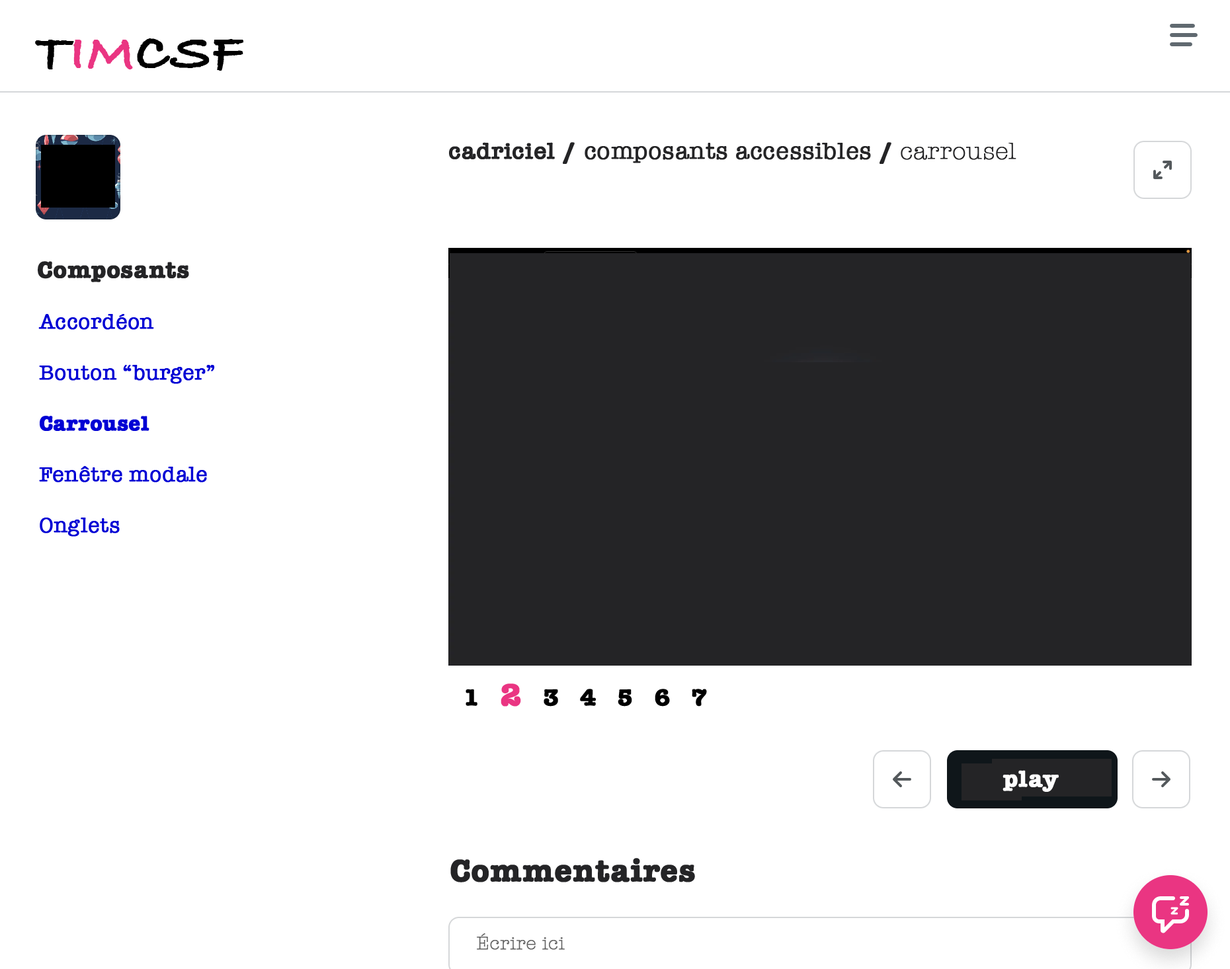
<style>
.page{position:relative;width:1230px;height:969px;background:#ffffff}
.page>*{position:absolute;margin:0}
.t1{font:52.9px "BradleyHandITCTT-Bold";letter-spacing:0.012em;color:#000000;font-weight:bold}
.t2{font:52.9px "BradleyHandITCTT-Bold";letter-spacing:0.012em;color:#ea3582;font-weight:bold}
.t3{font:23.8px "AmericanTypewriter";letter-spacing:0.012em;color:#242426;font-weight:bold}
.t4{font:23.8px "AmericanTypewriter-Semibold";letter-spacing:0.012em;color:#242426;font-weight:bold}
.t5{font:23.8px "AmericanTypewriter-Bold";letter-spacing:0.012em;color:#242426;font-weight:bold}
.t6{font:23.8px "AmericanTypewriter-Light";letter-spacing:0.012em;color:#242426;font-weight:bold}
.t7{font:21.2px "AmericanTypewriter";letter-spacing:0.012em;color:#0000d4;font-weight:bold}
.t8{font:21.2px "AmericanTypewriter-Bold";letter-spacing:0.012em;color:#0000d4;font-weight:bold}
.t9{font:21.2px "AmericanTypewriter";letter-spacing:0.012em;color:#242426;font-weight:bold}
.t10{font:23.8px "AmericanTypewriter-Bold";letter-spacing:0.012em;color:#000000;font-weight:bold}
.t11{font:31.7px "AmericanTypewriter-Bold";letter-spacing:0.012em;color:#ea3582;font-weight:bold}
.t12{font:23.8px "AmericanTypewriter-Bold";letter-spacing:0.012em;color:#fefefe;font-weight:bold}
.t13{font:31.7px "AmericanTypewriter-Bold";letter-spacing:0.012em;color:#242426;font-weight:bold}
.t14{font:18.5px "AmericanTypewriter-Light";letter-spacing:0.012em;color:#666666;font-weight:bold}
</style>
<div class="page">
<p class="t1" style="left:35px;top:38px;width:208px;height:33px">T<span class="t2">IM</span>CSF</p>
<p class="t3" style="left:449px;top:142px;width:567px;height:22px"><span class="t4">cadriciel</span><span class="t5"> / </span>composants accessibles<span class="t5"> / </span><span class="t6">carrousel</span></p>
<p class="t5" style="left:38px;top:261px;width:151px;height:21px">Composants</p>
<p class="t7" style="left:38px;top:314px;width:177px;height:223px">Accordéon<br><br>Bouton “burger”<br><br><span class="t8">Carrousel<br></span><br>Fenêtre modale<br><br>Onglets<br><span class="t9"></span></p>
<p class="t10" style="left:466px;top:684px;width:241px;height:23px">1   <span class="t11">2</span>   3   4   5   6   7</p>
<p class="t12" style="left:1003px;top:770px;width:56px;height:22px">play</p>
<p class="t13" style="left:450px;top:858px;width:245px;height:25px">Commentaires</p>
<p class="t14" style="left:477px;top:934px;width:88px;height:16px">Écrire ici</p>
</div>
